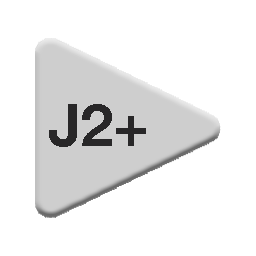
<style>
.page{position:relative;width:256px;height:256px;background:#ffffff}
.page>*{position:absolute;margin:0}
.t1{font:58.6px "HelveticaNeue-Bold";color:#282728}
</style>
<div class="page">
<p class="t1" style="left:49px;top:104px;width:97px;height:43px">J2+</p>
</div>
